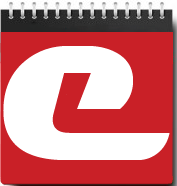
<style>
.page{position:relative;width:177px;height:186px;background:#c92027}
.page>*{position:absolute;margin:0}
.t1{font:341.5px "Magneto-Bold";color:#ffffff;scale:0.77 1}
</style>
<div class="page">
<p class="t1" style="left:3px;top:46px;width:167px;height:114px">e</p>
</div>
